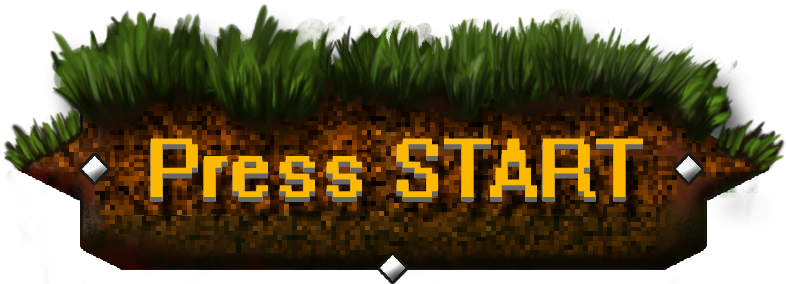
<style>
.page{position:relative;width:786px;height:284px}
.page>*{position:absolute;margin:0}
.t1{font:75px "System";color:#fdb902}
</style>
<div class="page">
<p class="t1" style="left:150px;top:142px;width:493px;height:59px">Press START</p>
</div>
